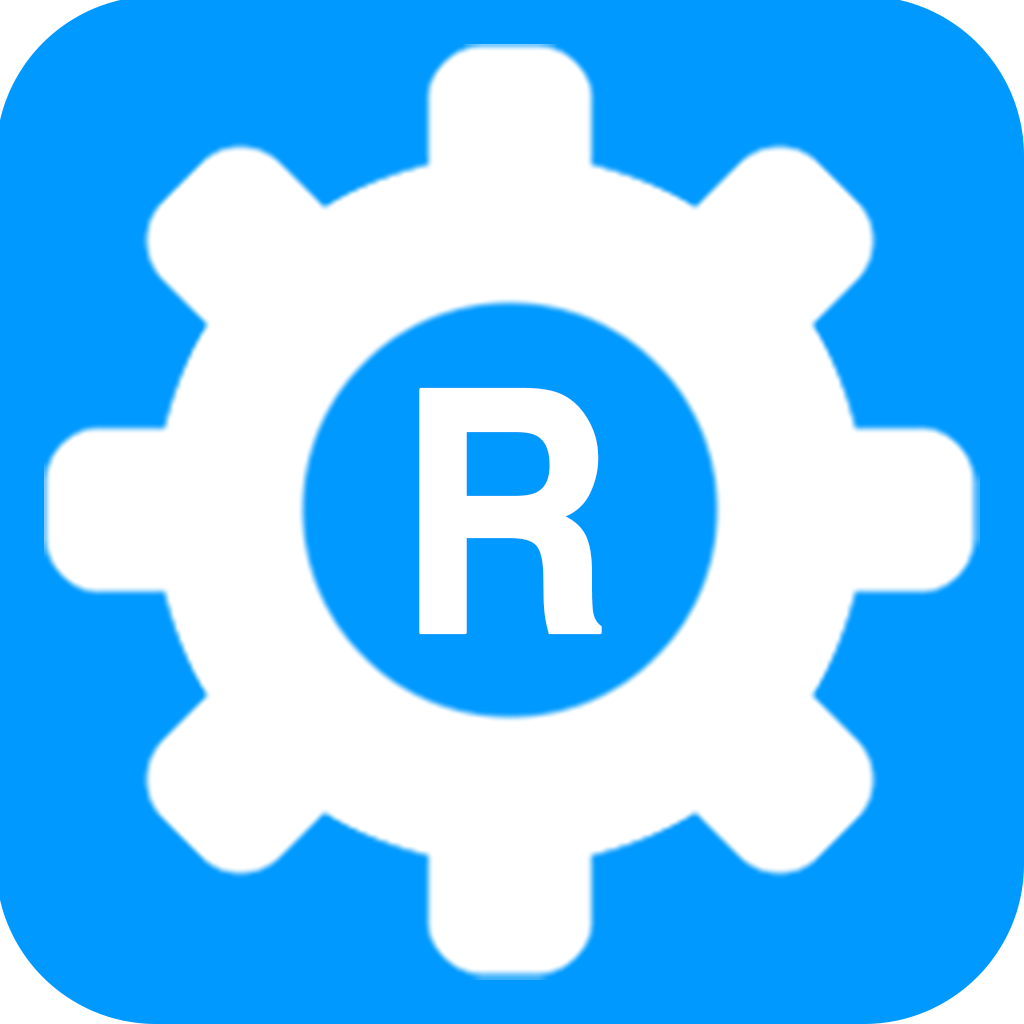
<style>
.page{position:relative;width:1024px;height:1024px;background:#0099ff}
.page>*{position:absolute;margin:0}
.t1{font:339.6px "Helvetica-Bold";color:#ffffff;font-weight:bold;scale:0.9 1}
</style>
<div class="page">
<p class="t1" style="left:419px;top:387px;width:183px;height:248px">R</p>
</div>
